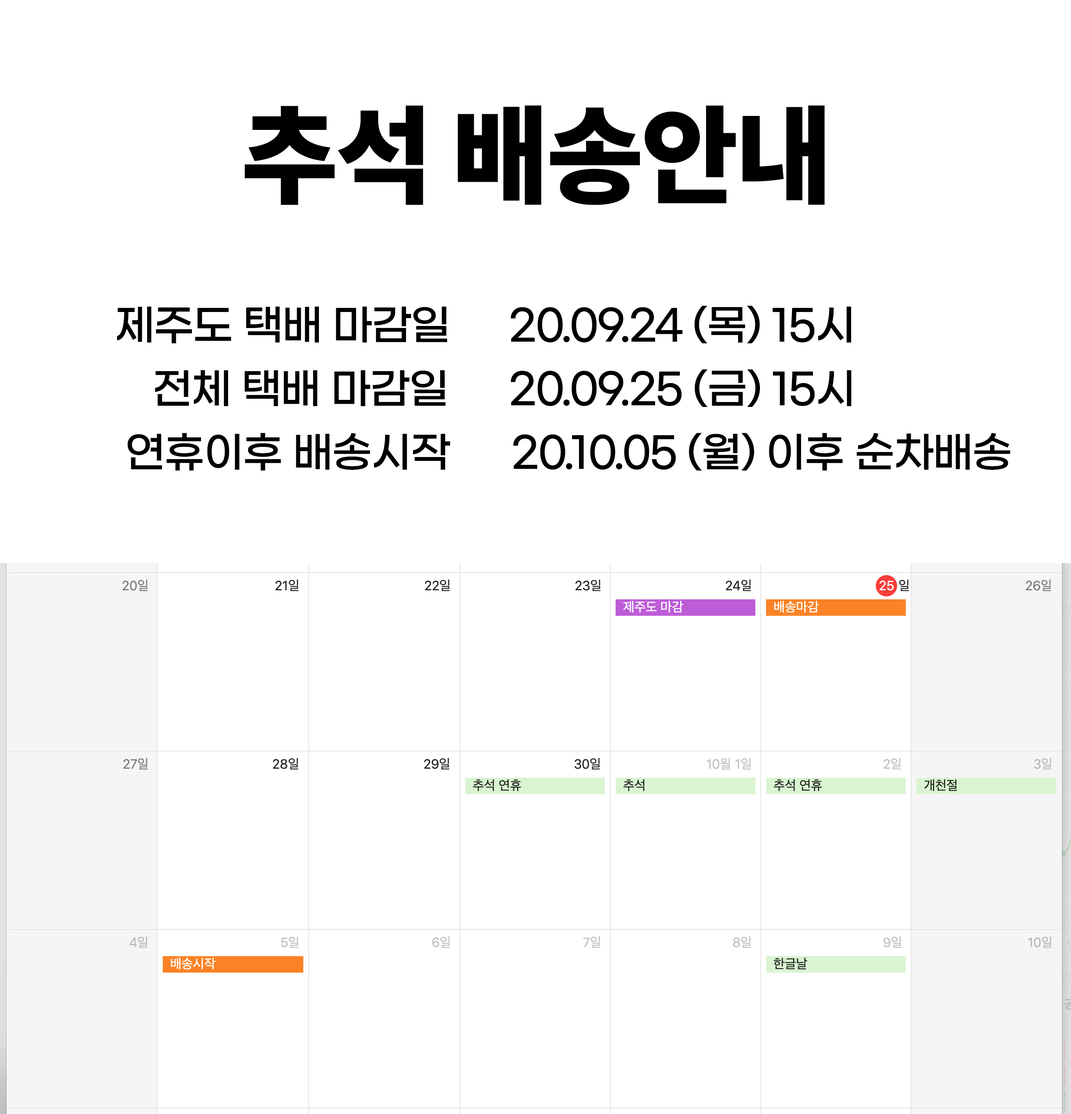
<style>
.page{position:relative;width:1071px;height:1114px;background:#ffffff}
.page>*{position:absolute;margin:0}
.t1{font:105.4px "NotoSansCJKkr-Black";letter-spacing:-0.05em;color:#000000;font-weight:bold}
.t2{font:41.8px "GmarketSansTTFMedium";letter-spacing:-0.05em;color:#000000;font-weight:bold}
</style>
<div class="page">
<p class="t1" style="left:244px;top:105px;width:581px;height:100px">추석 배송안내</p>
<p class="t2" style="left:117px;top:305px;width:734px;height:39px">제주도 택배 마감일     20.09.24 (목) 15시</p>
<p class="t2" style="left:155px;top:369px;width:696px;height:38px">전체 택배 마감일     20.09.25 (금) 15시</p>
<p class="t2" style="left:127px;top:433px;width:883px;height:37px">연휴이후 배송시작      20.10.05 (월) 이후 순차배송</p>
</div>
